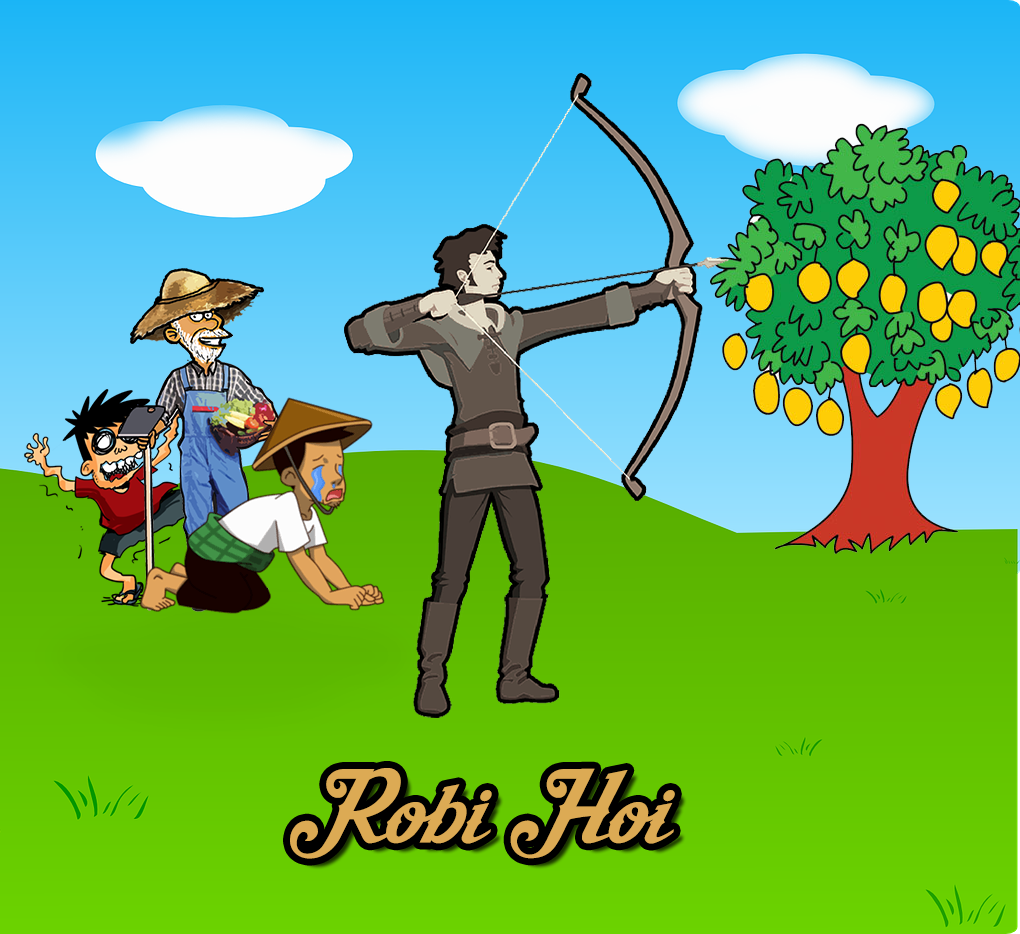
<style>
.page{position:relative;width:1020px;height:934px}
.page>*{position:absolute;margin:0}
.t1{font:76px "AishaScript";color:#dcaa54}
</style>
<div class="page">
<p class="t1" style="left:290px;top:768px;width:385px;height:91px">Robi Hoi</p>
</div>
